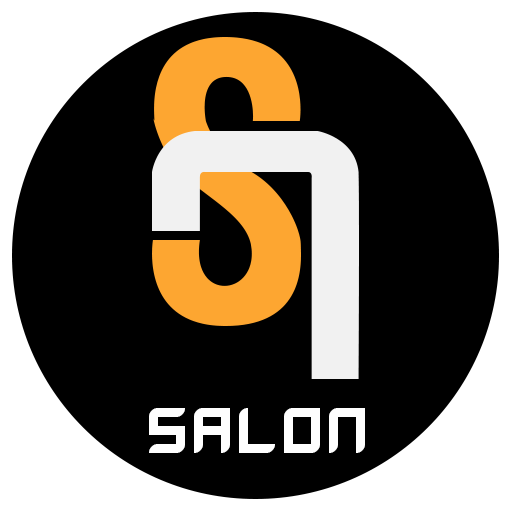
<style>
.page{position:relative;width:512px;height:512px;background:#000000}
.page>*{position:absolute;margin:0}
.t1{font:90px "Dalila";color:#fefefe;text-transform:uppercase}
</style>
<div class="page">
<p class="t1" style="left:149px;top:408px;width:216px;height:45px">salon</p>
</div>
